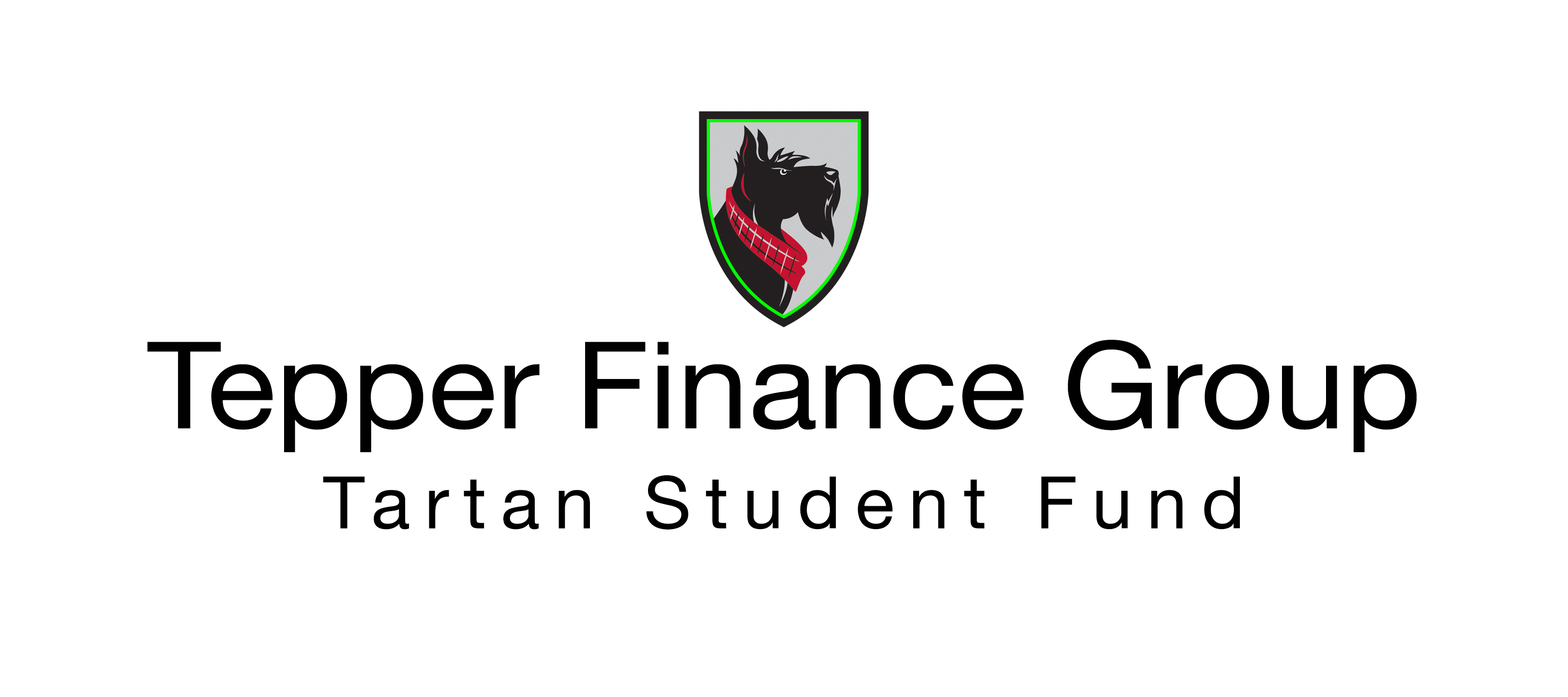
<style>
.page{position:relative;width:1568px;height:697px;background:#ffffff}
.page>*{position:absolute;margin:0}
.t1{font:121px "HelveticaNeue";color:#010101;scale:1.06 1}
.t2{font:72.6px "HelveticaNeue";letter-spacing:0.2em;color:#000000}
</style>
<div class="page">
<p class="t1" style="left:147px;top:340px;width:1270px;height:112px">Tepper Finance Group</p>
<p class="t2" style="left:323px;top:475px;width:917px;height:54px">Tartan Student Fund</p>
</div>
